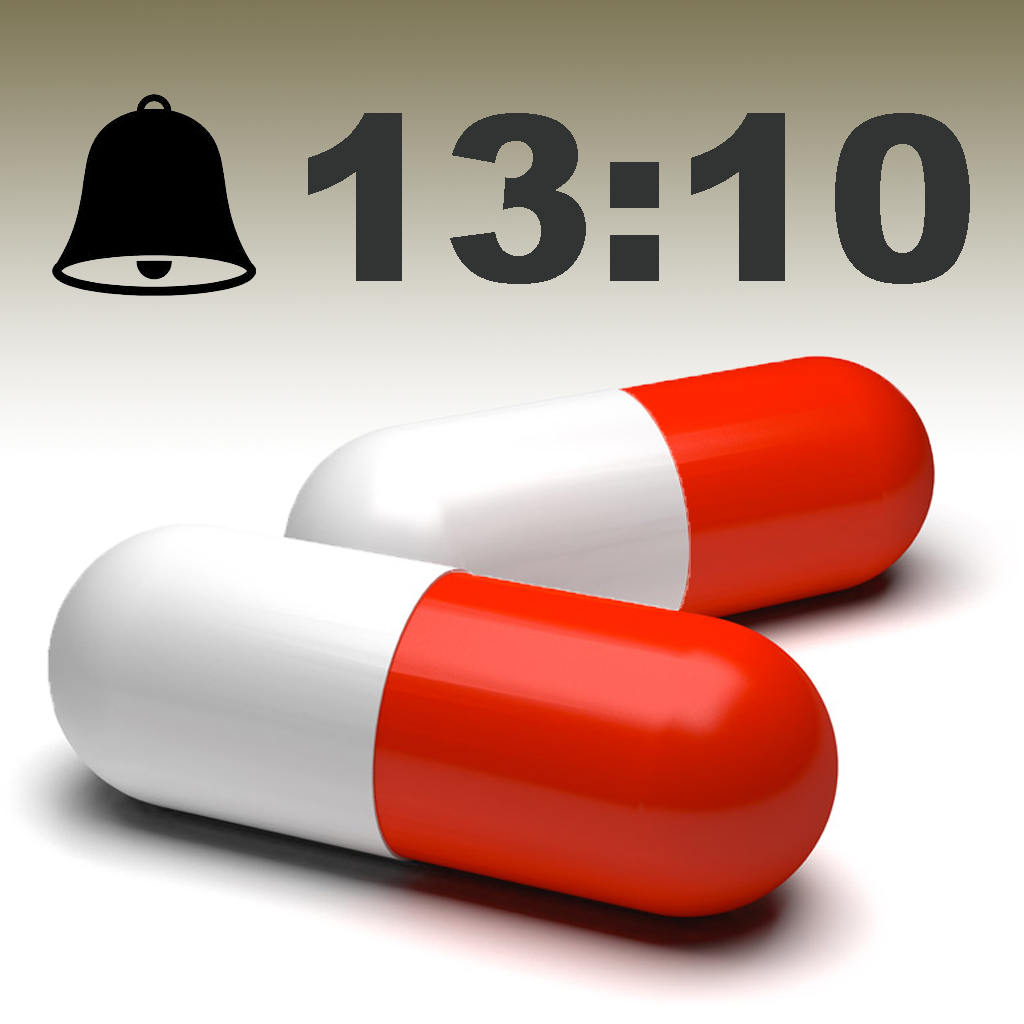
<style>
.page{position:relative;width:1024px;height:1024px}
.page>*{position:absolute;margin:0}
.t1{font:230px "Arial-Black";color:#323434}
</style>
<div class="page">
<p class="t1" style="left:308px;top:113px;width:662px;height:171px">13:10</p>
</div>
